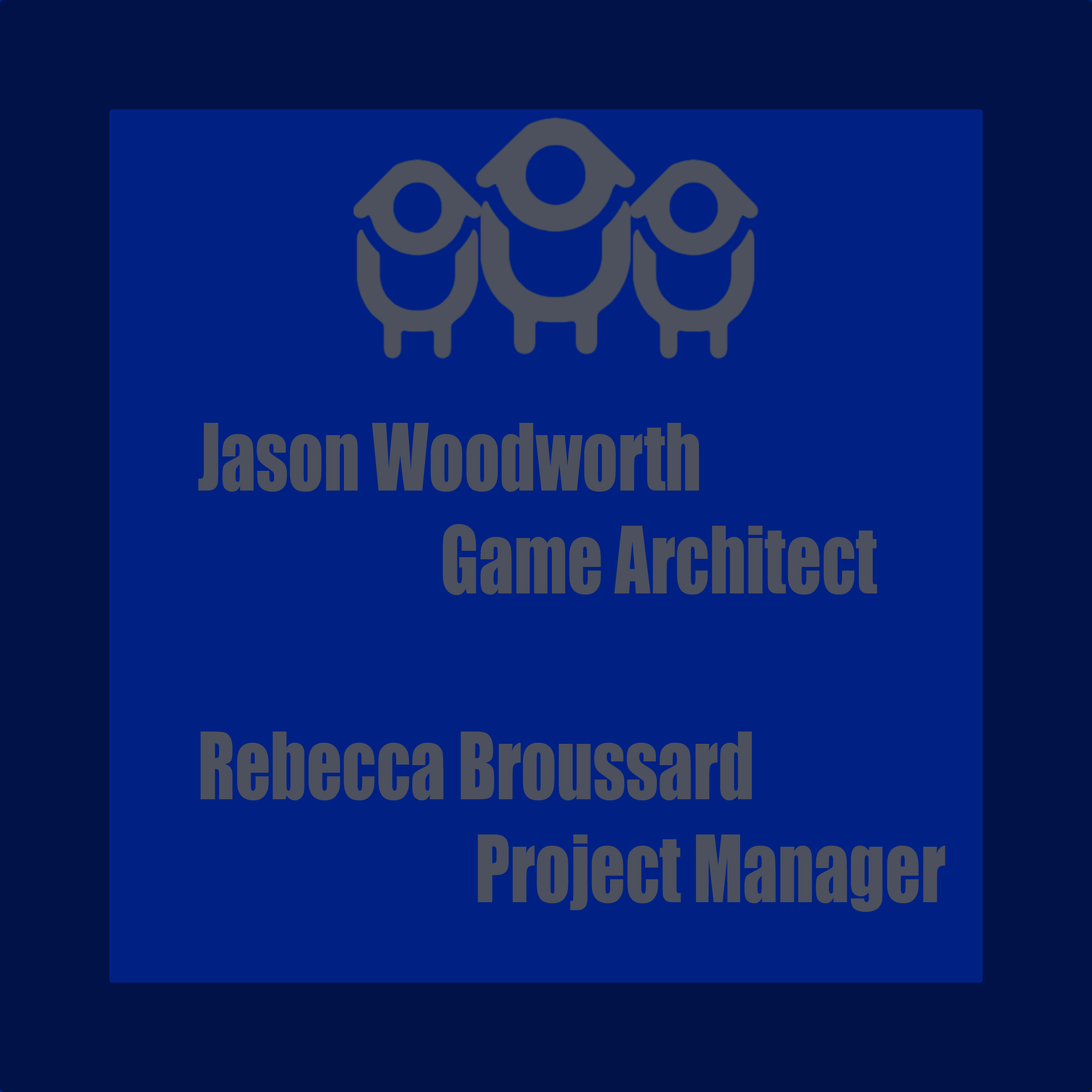
<style>
.page{position:relative;width:1092px;height:1092px;background:#002183}
.page>*{position:absolute;margin:0}
.t1{font:85.8px "Impact";color:#4d505d;scale:0.81 1}
</style>
<div class="page">
<p class="t1" style="left:198px;top:423px;width:747px;height:489px">Jason Woodworth<br>       Game Architect<br><br>Rebecca Broussard<br>        Project Manager</p>
</div>
